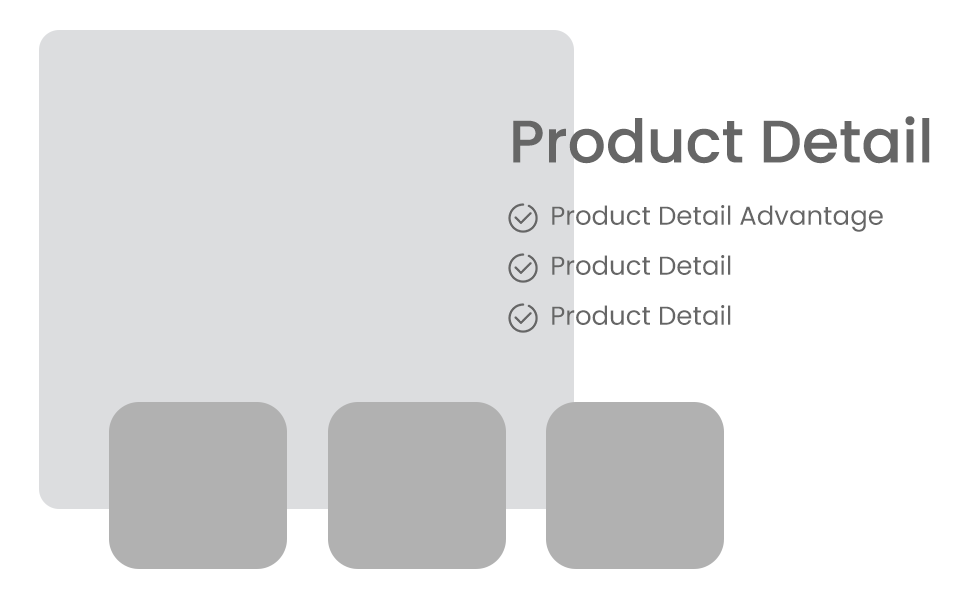
<style>
.page{position:relative;width:970px;height:600px;background:#ffffff}
.page>*{position:absolute;margin:0}
.t1{font:60px "Poppins-Medium";color:#666666}
.t2{font:26px "Poppins-Regular";color:#666666}
</style>
<div class="page">
<p class="t1" style="left:513px;top:116px;width:417px;height:48px">Product Detail</p>
<p class="t2" style="left:552px;top:205px;width:331px;height:27px">Product Detail Advantage</p>
<p class="t2" style="left:552px;top:255px;width:179px;height:20px">Product Detail</p>
<p class="t2" style="left:552px;top:305px;width:179px;height:20px">Product Detail</p>
</div>
